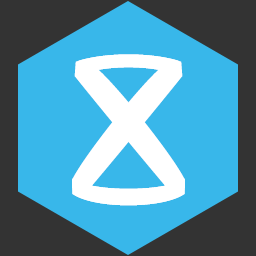
<style>
.page{position:relative;width:256px;height:256px;background:#38b7ea}
.page>*{position:absolute;margin:0}
.t1{font:160px "FZLTZHK--GBK1-0";color:#ffffff}
</style>
<div class="page">
<p class="t1" style="left:72px;top:54px;width:113px;height:152px">Z</p>
<p class="t1" style="left:72px;top:54px;width:113px;height:152px;rotate:180deg">Z</p>
</div>
